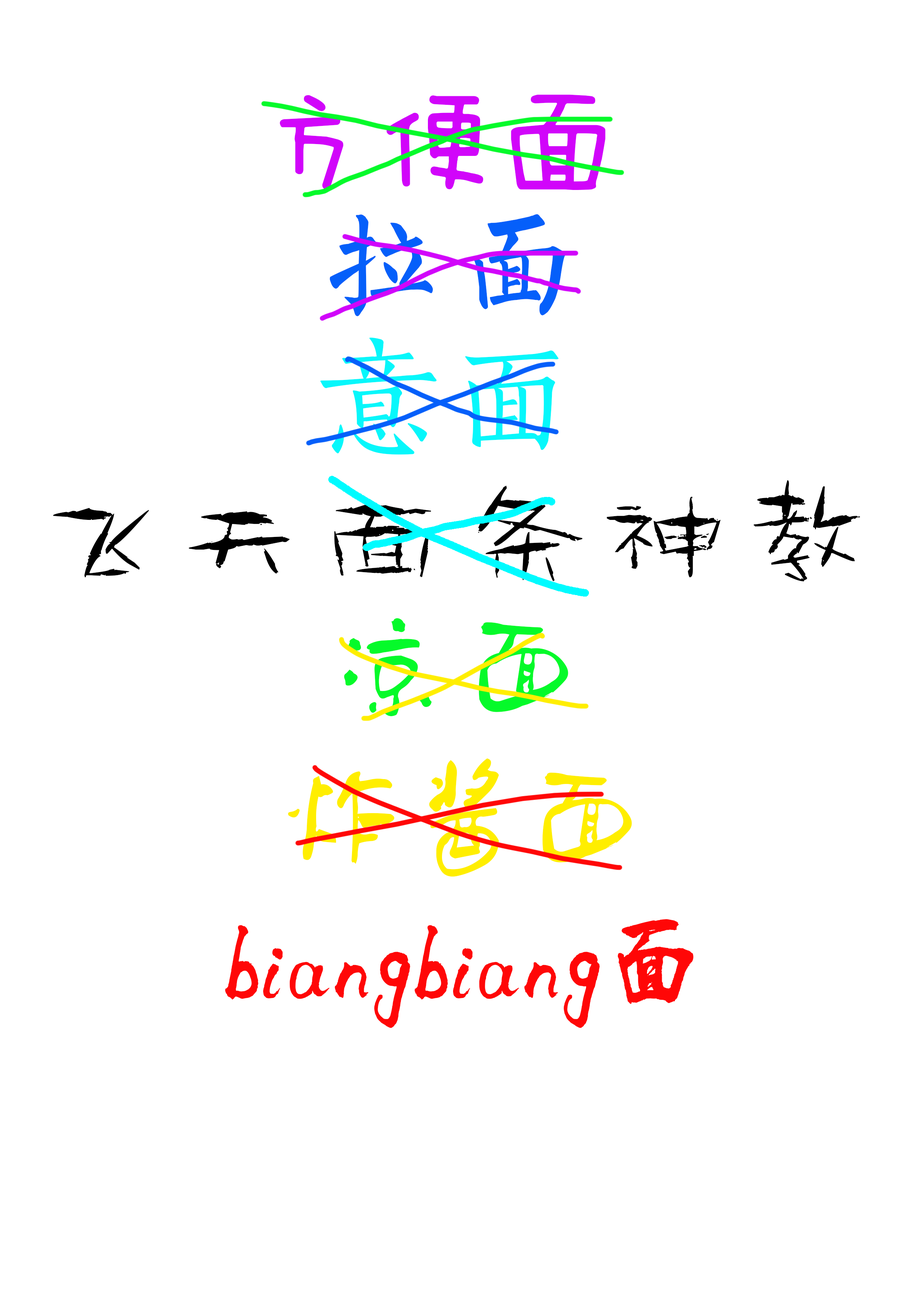
<style>
.page{position:relative;width:918px;height:1299px;background:#ffffff}
.page>*{position:absolute;margin:0}
.t1{font:123.4px "FZMWJW--GB1-0";color:#d105fa}
.t2{font:123.4px "FZSXSLKJW--GB1-0";letter-spacing:0.1em;color:#055ffa}
.t3{font:123.4px "FZSKBXKJW--GB1-0";letter-spacing:0.1em;color:#07f7fb}
.t4{font:128.8px "--";letter-spacing:0.1em;color:#000000}
.t5{font:123.4px "FZZJ-TTMBJW";letter-spacing:0.1em;color:#05fa2a}
.t6{font:123.4px "FZZJ-TTMBJW";color:#ffee00}
.t7{font:108px "LiXuKe";color:#ff0707}
</style>
<div class="page">
<p class="t1" style="left:280px;top:94px;width:326px;height:96px">方便面</p>
<p class="t2" style="left:330px;top:214px;width:236px;height:102px">拉面</p>
<p class="t3" style="left:320px;top:337px;width:239px;height:118px">意面</p>
<p class="t4" style="left:53px;top:480px;width:807px;height:101px">飞天面条神教</p>
<p class="t5" style="left:344px;top:618px;width:224px;height:98px">凉面</p>
<p class="t6" style="left:288px;top:758px;width:344px;height:119px">炸酱面</p>
<p class="t7" style="left:225px;top:919px;width:469px;height:109px">biangbiang面</p>
</div>
